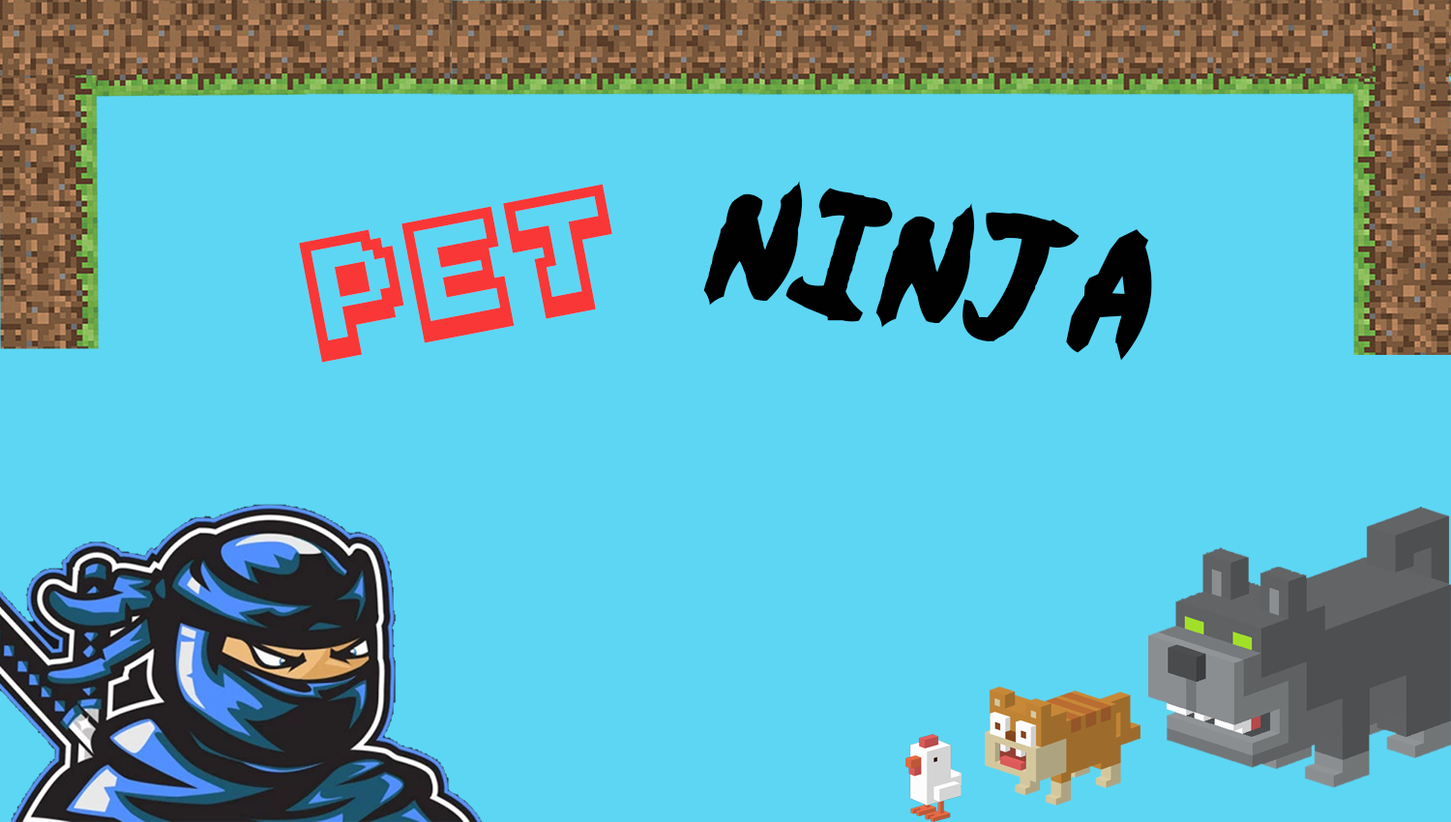
<style>
.page{position:relative;width:1451px;height:822px;background:#5dd6f4}
.page>*{position:absolute;margin:0}
.t1{font:161.8px "Mario-Kart-DS";color:#f93737}
.t2{font:145.1px "Ninja-Naruto";color:#010101}
</style>
<div class="page">
<p class="t1" style="left:299px;top:184px;width:313px;height:179px;rotate:-11deg">PET</p>
<p class="t2" style="left:703px;top:181px;width:449px;height:180px;rotate:8deg">NINJA</p>
</div>
